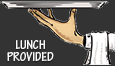
<style>
.page{position:relative;width:115px;height:66px;background:#333333}
.page>*{position:absolute;margin:0}
.t1{font:13px/12px "TektonPro-BoldCond";letter-spacing:0.01em;color:#fafafa}
</style>
<div class="page">
<p class="t1" style="left:7px;top:40px;width:47px;height:21px;text-align:center">LUNCH<br>PROVIDED</p>
</div>
